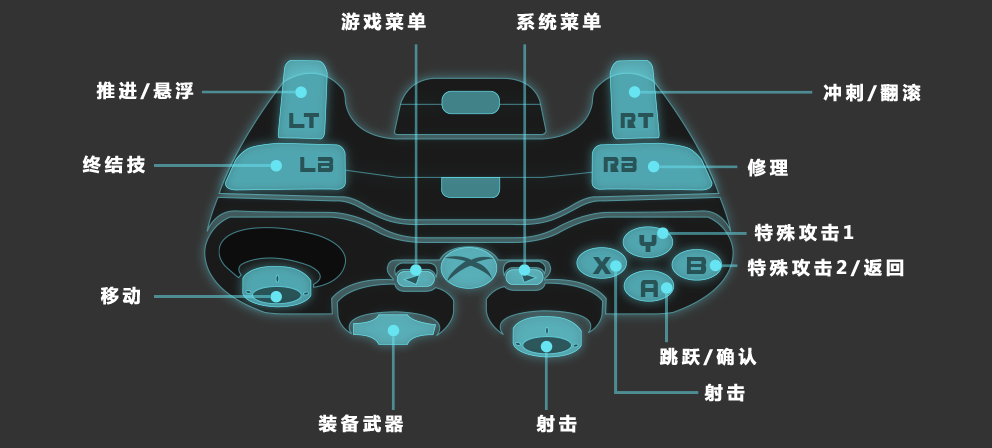
<style>
.page{position:relative;width:992px;height:448px;background:#333333}
.page>*{position:absolute;margin:0}
.t1{font:18px "MicrosoftYaHei-Bold";letter-spacing:0.2em;color:#ffffff;font-weight:bold}
</style>
<div class="page">
<p class="t1" style="left:341px;top:12px;width:85px;height:19px">游戏菜单</p>
<p class="t1" style="left:516px;top:12px;width:85px;height:19px">系统菜单</p>
<p class="t1" style="left:96px;top:81px;width:98px;height:19px">推进/悬浮</p>
<p class="t1" style="left:823px;top:83px;width:98px;height:19px">冲刺/翻滚</p>
<p class="t1" style="left:82px;top:155px;width:63px;height:19px">终结技</p>
<p class="t1" style="left:747px;top:158px;width:41px;height:19px">修理</p>
<p class="t1" style="left:754px;top:223px;width:100px;height:19px">特殊攻击1</p>
<p class="t1" style="left:747px;top:258px;width:157px;height:19px">特殊攻击2/返回</p>
<p class="t1" style="left:100px;top:286px;width:40px;height:19px">移动</p>
<p class="t1" style="left:659px;top:347px;width:98px;height:19px">跳跃/确认</p>
<p class="t1" style="left:704px;top:383px;width:41px;height:19px">射击</p>
<p class="t1" style="left:318px;top:414px;width:85px;height:19px">装备武器</p>
<p class="t1" style="left:536px;top:414px;width:41px;height:19px">射击</p>
</div>
